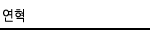
<style>
.page{position:relative;width:150px;height:30px;background:#ffffff}
.page>*{position:absolute;margin:0}
.t1{font:14px "NanumGothic";color:#000000;scale:0.9 1}
</style>
<div class="page">
<p class="t1" style="left:3px;top:9px;width:21px;height:14px">연혁</p>
</div>
